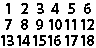
<style>
.page{position:relative;width:96px;height:48px;background:#ffffff}
.page>*{position:absolute;margin:0}
.t1{font:16px "MyriadPro-Bold";letter-spacing:0.05em;color:#000000}
.t2{font:12px "MyriadPro-Bold";letter-spacing:0.05em;color:#000000}
.t3{font:12px "MyriadPro-Bold";letter-spacing:-0.1em;color:#000000}
</style>
<div class="page">
<p class="t1" style="left:6px;top:3px;width:4px;height:11px">1</p>
<p class="t2" style="left:21px;top:3px;width:7px;height:11px">2</p>
<p class="t2" style="left:37px;top:3px;width:7px;height:11px">3</p>
<p class="t2" style="left:51px;top:3px;width:8px;height:11px">4</p>
<p class="t2" style="left:68px;top:3px;width:7px;height:11px">5</p>
<p class="t2" style="left:84px;top:3px;width:7px;height:11px">6</p>
<p class="t2" style="left:5px;top:19px;width:7px;height:11px">7</p>
<p class="t2" style="left:21px;top:19px;width:7px;height:11px">8</p>
<p class="t2" style="left:36px;top:19px;width:7px;height:11px">9</p>
<p class="t3" style="left:49px;top:19px;width:13px;height:11px">10</p>
<p class="t3" style="left:65px;top:19px;width:11px;height:11px">11</p>
<p class="t3" style="left:81px;top:19px;width:13px;height:11px">12</p>
<p class="t3" style="left:1px;top:35px;width:13px;height:11px">13</p>
<p class="t3" style="left:17px;top:35px;width:13px;height:11px">14</p>
<p class="t3" style="left:33px;top:35px;width:13px;height:11px">15</p>
<p class="t3" style="left:48px;top:35px;width:13px;height:11px">16</p>
<p class="t3" style="left:65px;top:35px;width:13px;height:11px">17</p>
<p class="t3" style="left:81px;top:35px;width:13px;height:11px">18</p>
</div>
